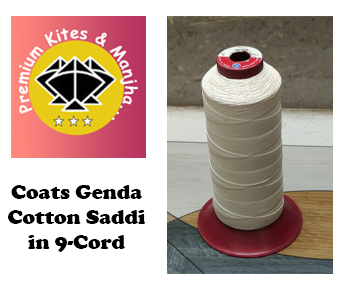
<style>
.page{position:relative;width:348px;height:284px;background:#ffffff}
.page>*{position:absolute;margin:0}
.t1{font:20.8px "CooperBlack";color:#000000}
</style>
<div class="page">
<p class="t1" style="left:8px;top:185px;width:138px;height:67px;text-align:center">Coats Genda<br>Cotton Saddi<br>in 9-Cord</p>
</div>
